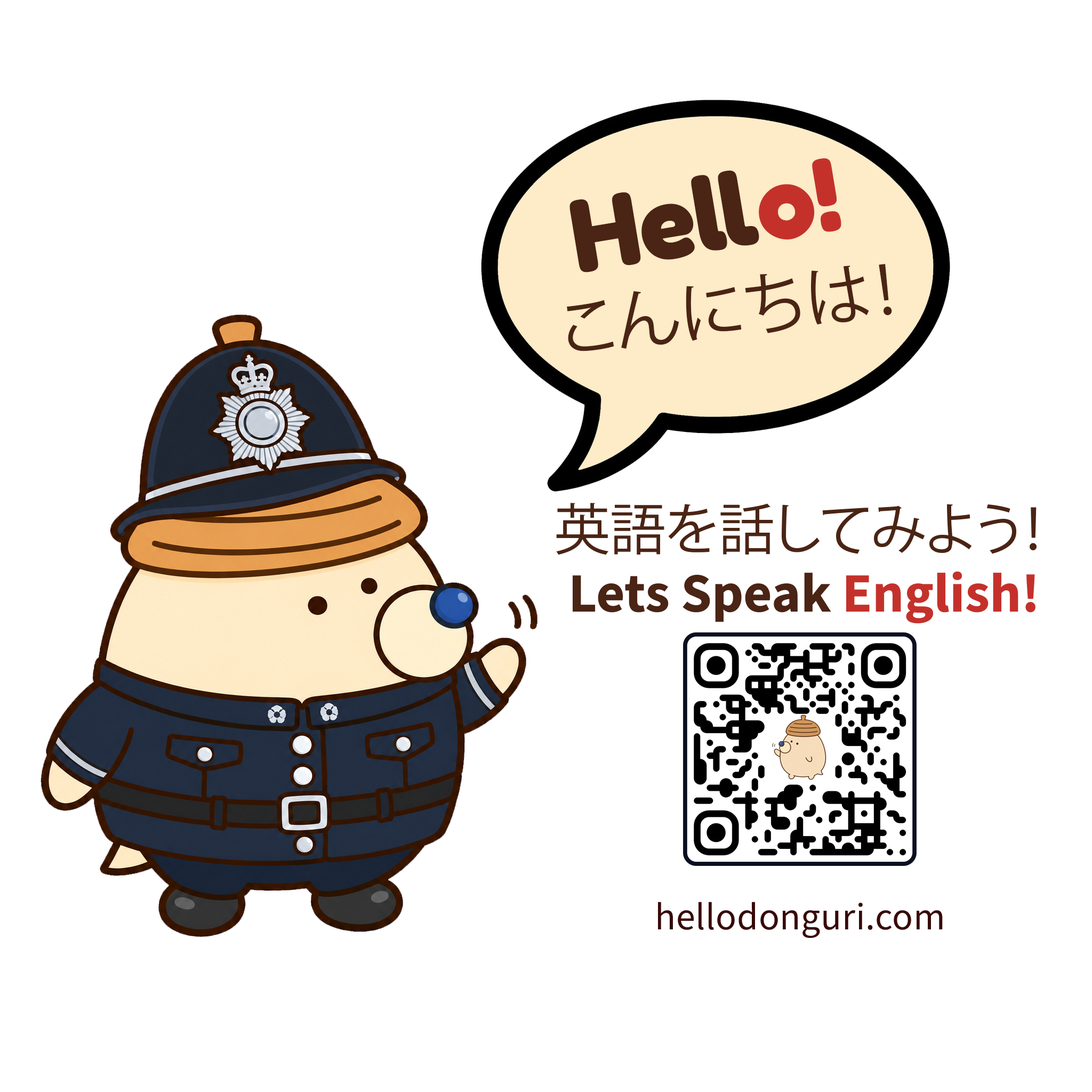
<style>
.page{position:relative;width:1092px;height:1092px;background:#ffffff}
.page>*{position:absolute;margin:0}
.t1{font:104.5px "Fredoka-Bold";color:#4a2414}
.t2{font:104.5px "Fredoka-Bold";color:#c4312b}
.t3{font:66.1px "KozGoPr6N-Regular";color:#4a2414}
.t4{font:55.5px "KozGoPr6N-Regular";color:#4a2414}
.t5{font:55.5px "SourceSansRoman-Bold";color:#4a2414}
.t6{font:55.5px "SourceSansRoman-Bold";color:#c4312b}
.t7{font:38.4px "SourceSansRoman-Regular";letter-spacing:0.01em;color:#380909}
</style>
<div class="page">
<p class="t1" style="left:569px;top:158px;width:272px;height:114px;rotate:-9deg">Hell<span class="t2">o!</span></p>
<p class="t3" style="left:567px;top:264px;width:325px;height:87px;rotate:-7deg">こんにちは！</p>
<p class="t4" style="left:556px;top:503px;width:481px;height:52px">英語を話してみよう！</p>
<p class="t5" style="left:573px;top:571px;width:462px;height:52px">Lets Speak <span class="t6">English!</span></p>
<p class="t7" style="left:658px;top:902px;width:285px;height:36px">hellodonguri.com</p>
</div>
